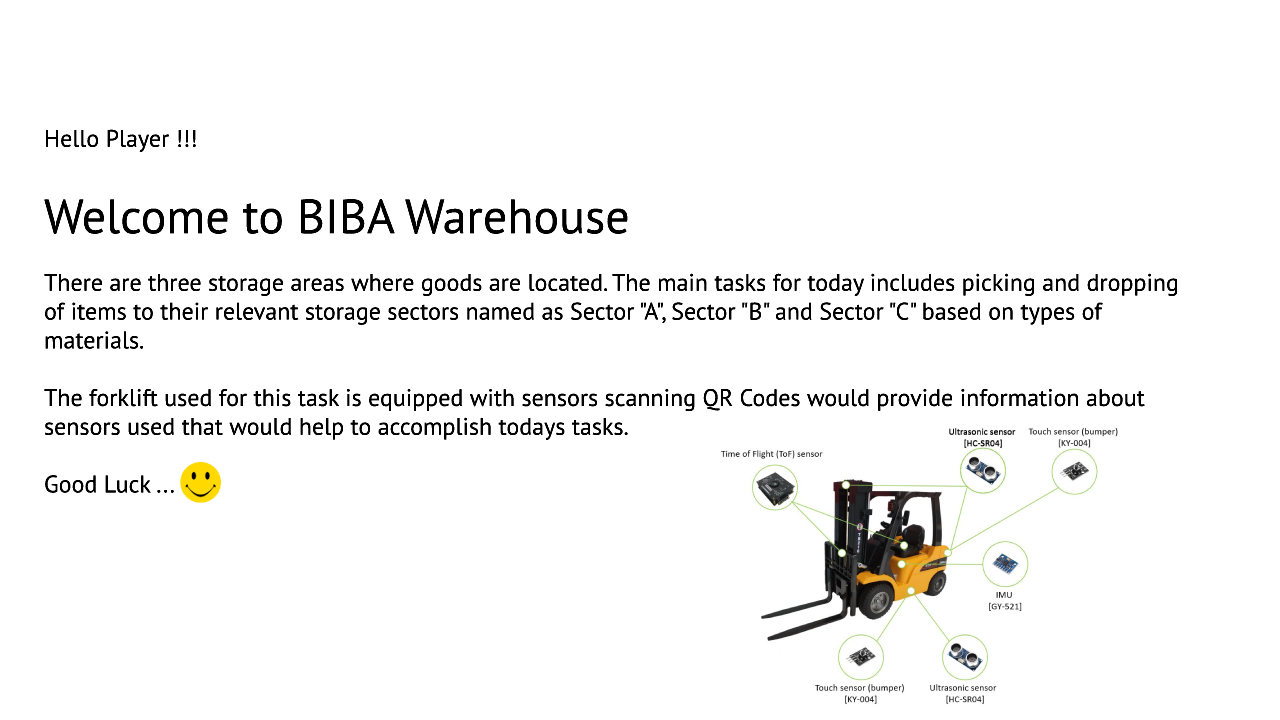
<style>
.page{position:relative;width:1280px;height:720px;background:#ffffff}
.page>*{position:absolute;margin:0}
.t1{font:24px "MyriadPro-Regular";color:#000000}
.t2{font:48px "MyriadPro-Regular";color:#000000}
</style>
<div class="page">
<p class="t1" style="left:44px;top:129px;width:1134px;height:364px">Hello Player !!!<br><br><span class="t2">Welcome to BIBA Warehouse <br><br></span>There are three storage areas where goods are located. The main tasks for today includes picking and dropping of items to their relevant storage sectors named as Sector "A", Sector "B" and Sector "C" based on types of materials. <br><br>The forklift used for this task is equipped with sensors scanning QR Codes would provide information about sensors used that would help to accomplish todays tasks.<br><br>Good Luck ...</p>
</div>
